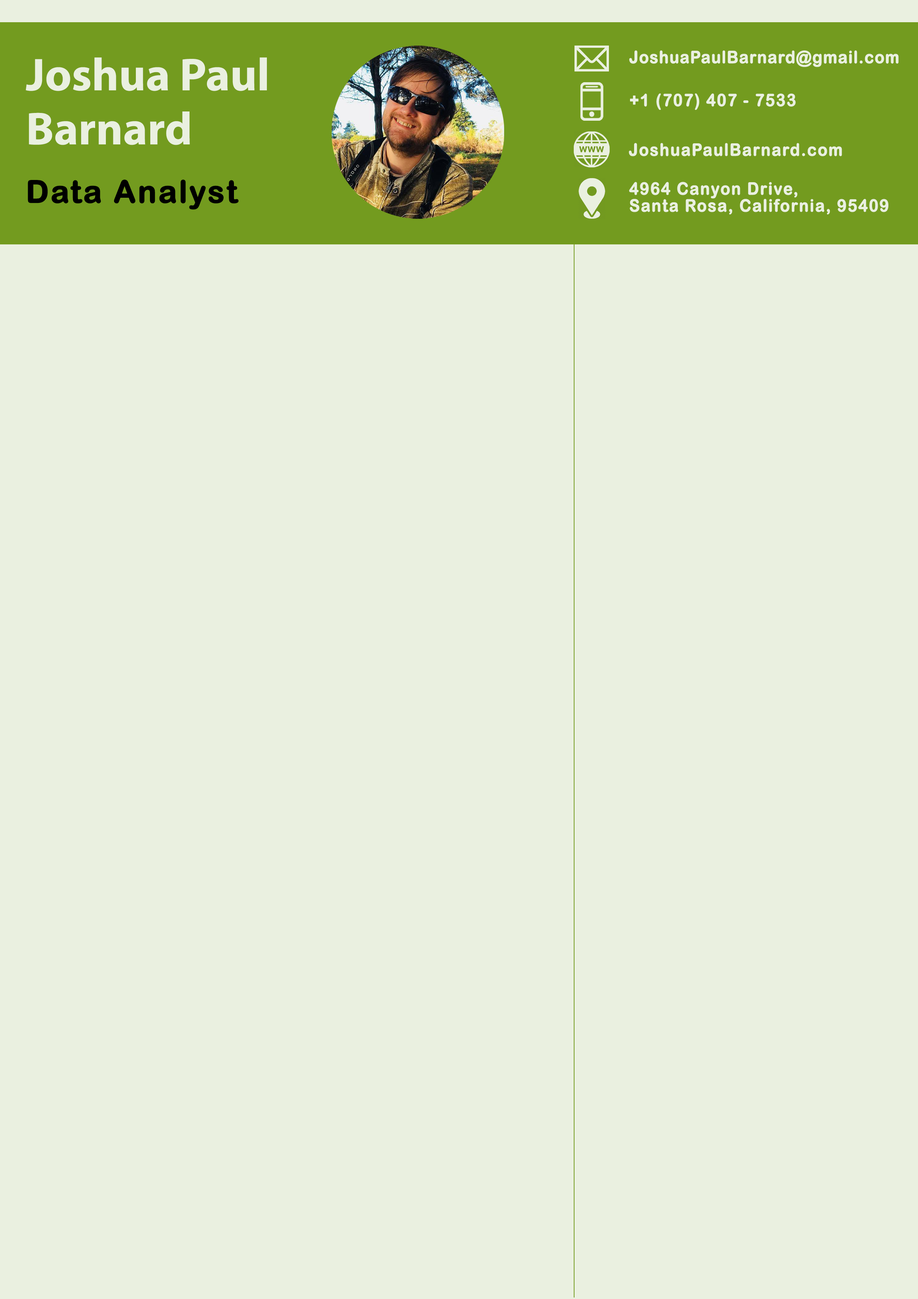
<style>
.page{position:relative;width:918px;height:1299px;background:#eaf0e0}
.page>*{position:absolute;margin:0}
.t1{font:17px "ArialRoundedMTBold";letter-spacing:0.03em;color:#eaf0e0;font-weight:bold;scale:0.93 1}
.t2{font:46.3px/54px "MyriadPro-Bold";color:#eaf0e0}
.t3{font:17px "ArialRoundedMTBold";letter-spacing:0.05em;color:#eaf0e0;font-weight:bold;scale:0.93 1}
.t4{font:30.9px "ArialRoundedMTBold";letter-spacing:0.04em;color:#000000;font-weight:bold}
.t5{font:17px/17px "ArialRoundedMTBold";letter-spacing:0.05em;color:#eaf0e0;font-weight:bold;scale:0.93 1}
</style>
<div class="page">
<p class="t1" style="left:629px;top:50px;width:270px;height:17px">JoshuaPaulBarnard@gmail.com</p>
<p class="t2" style="left:26px;top:57px;width:241px;height:88px">Joshua Paul<br>Barnard</p>
<p class="t3" style="left:630px;top:93px;width:166px;height:17px">+1 (707) 407 - 7533</p>
<p class="t3" style="left:629px;top:143px;width:213px;height:13px">JoshuaPaulBarnard.com</p>
<p class="t4" style="left:28px;top:180px;width:211px;height:30px">Data Analyst</p>
<p class="t5" style="left:629px;top:182px;width:260px;height:33px">4964 Canyon Drive,<br>Santa Rosa, California, 95409</p>
</div>
